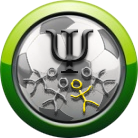
<style>
.page{position:relative;width:138px;height:138px}
.page>*{position:absolute;margin:0}
.t1{font:60px "DejaVuSerif"}
</style>
<div class="page">
<p class="t1" style="left:45px;top:29px;width:49px;height:44px">Ψ</p>
</div>
